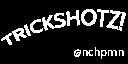
<style>
.page{position:relative;width:128px;height:64px;background:#000000}
.page>*{position:absolute;margin:0}
.t1{font:19px "Cabin-Regular";color:#ffffff}
.t2{font:12px "Cabin-Bold";color:#ffffff}
</style>
<div class="page">
<p class="t1" style="left:1px;top:9px;width:125px;height:36px;rotate:-10deg">TRICKSHOTZ!</p>
<p class="t2" style="left:74px;top:47px;width:50px;height:12px">@nchpmn</p>
</div>
